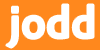
<style>
.page{position:relative;width:100px;height:50px;background:#ff881d}
.page>*{position:absolute;margin:0}
.t1{font:44px "DTLProkyonTMedium";letter-spacing:-0.03em;color:#ffffff;font-weight:bold}
</style>
<div class="page">
<p class="t1" style="left:6px;top:4px;width:88px;height:44px">jodd</p>
</div>
